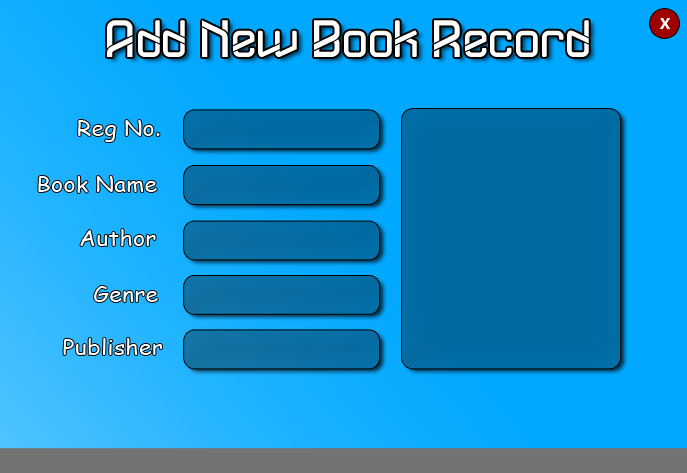
<style>
.page{position:relative;width:687px;height:473px;background:#00a8ff}
.page>*{position:absolute;margin:0}
.t1{font:52.5px "DYLOVASTUFF";color:#fffffe}
.t2{font:16px "MicrosoftNewTaiLue-Bold";color:#fffefe}
.t3{font:21.1px "ComicSansMS";color:#fffffe;scale:1.11 1}
</style>
<div class="page">
<p class="t1" style="left:107px;top:20px;width:482px;height:37px">Add New Book Record</p>
<p class="t2" style="left:659px;top:18px;width:11px;height:11px">X</p>
<p class="t3" style="left:78px;top:120px;width:82px;height:22px">Reg No.</p>
<p class="t3" style="left:38px;top:176px;width:119px;height:17px">Book Name</p>
<p class="t3" style="left:80px;top:229px;width:76px;height:17px">Author</p>
<p class="t3" style="left:94px;top:286px;width:64px;height:16px">Genre</p>
<p class="t3" style="left:63px;top:338px;width:99px;height:17px">Publisher</p>
</div>
